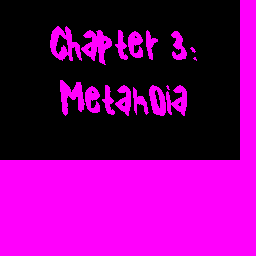
<style>
.page{position:relative;width:256px;height:256px;background:#000000}
.page>*{position:absolute;margin:0}
.t1{font:45.8px "XGhostXRegular";color:#ff00fc}
</style>
<div class="page">
<p class="t1" style="left:50px;top:26px;width:147px;height:90px;text-align:center">Chapter 3:<br>Metanoia</p>
</div>
